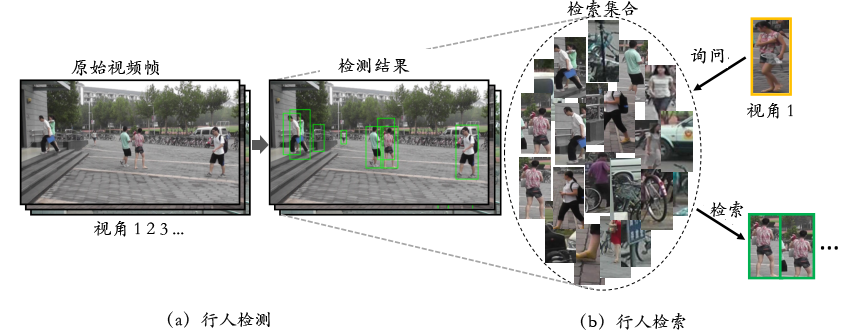
<style>
.page{position:relative;width:850px;height:334px;background:#ffffff}
.page>*{position:absolute;margin:0}
.t1{font:18px "STKaiti";color:#000000}
</style>
<div class="page">
<p class="t1" style="left:567px;top:0px;width:71px;height:17px">检索集合</p>
<p class="t1" style="left:690px;top:48px;width:34px;height:16px">询问</p>
<p class="t1" style="left:71px;top:60px;width:88px;height:16px">原始视频帧</p>
<p class="t1" style="left:338px;top:58px;width:72px;height:16px">检测结果</p>
<p class="t1" style="left:747px;top:103px;width:46px;height:16px">视角 1</p>
<p class="t1" style="left:710px;top:201px;width:34px;height:17px">检索</p>
<p class="t1" style="left:94px;top:221px;width:90px;height:16px">视角 1 2 3 ...</p>
<p class="t1" style="left:167px;top:311px;width:103px;height:17px">（a）行人检测</p>
<p class="t1" style="left:580px;top:313px;width:106px;height:17px">（b）行人检索</p>
</div>
